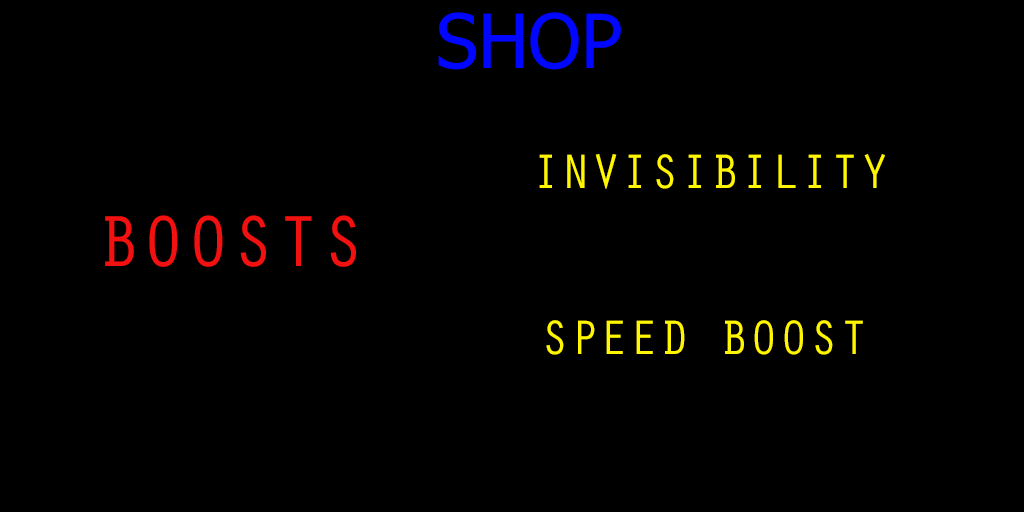
<style>
.page{position:relative;width:1024px;height:512px;background:#000000}
.page>*{position:absolute;margin:0}
.t1{font:74.7px "Tahoma";color:#0006ff}
.t2{font:49.8px "OratorStd";color:#fff600}
.t3{font:74.7px "OratorStd";color:#f11111}
</style>
<div class="page">
<p class="t1" style="left:438px;top:12px;width:183px;height:58px">SHOP</p>
<p class="t2" style="left:539px;top:154px;width:346px;height:35px">INVISIBILITY</p>
<p class="t3" style="left:105px;top:215px;width:251px;height:52px">BOOSTS</p>
<p class="t2" style="left:546px;top:320px;width:317px;height:35px">SPEED BOOST</p>
</div>
